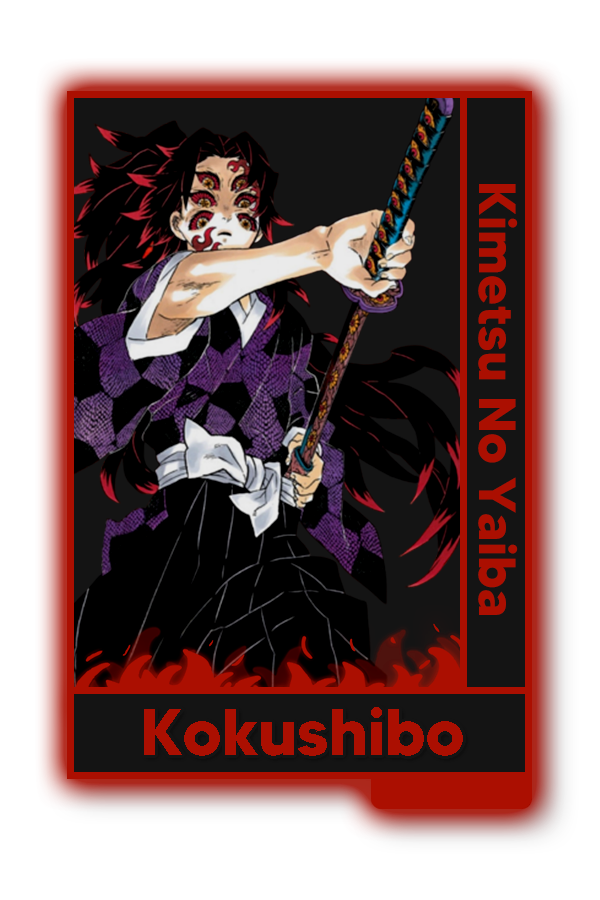
<style>
.page{position:relative;width:600px;height:900px;background:#ffffff}
.page>*{position:absolute;margin:0}
.t1{font:52px "MADETOMMY-Bold";color:#ab0f01}
.t2{font:65.2px "MADETOMMY-Bold";color:#ab0f01}
</style>
<div class="page">
<p class="t1" style="left:478px;top:184px;width:40px;height:431px;rotate:90deg">Kimetsu No Yaiba</p>
<p class="t2" style="left:144px;top:707px;width:319px;height:49px">Kokushibo</p>
</div>
